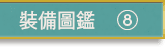
<style>
.page{position:relative;width:165px;height:47px;background:#579f9c}
.page>*{position:absolute;margin:0}
.t1{font:20px "GothicMB101Pro-Regular";color:#f2ebe5;scale:0.95 1}
</style>
<div class="page">
<p class="t1" style="left:19px;top:10px;width:76px;height:20px">裝備圖鑑</p>
</div>
